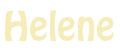
<style>
.page{position:relative;width:120px;height:50px;background:#ffffff}
.page>*{position:absolute;margin:0}
.t1{font:36px "HoboStd";color:#f7ecb7}
</style>
<div class="page">
<p class="t1" style="left:5px;top:10px;width:109px;height:31px">Helene</p>
</div>
